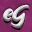
<style>
.page{position:relative;width:32px;height:32px}
.page>*{position:absolute;margin:0}
.t1{font:25px "JamesStroker";color:#e8e1e6}
</style>
<div class="page">
<p class="t1" style="left:3px;top:4px;width:26px;height:24px">eG</p>
</div>
